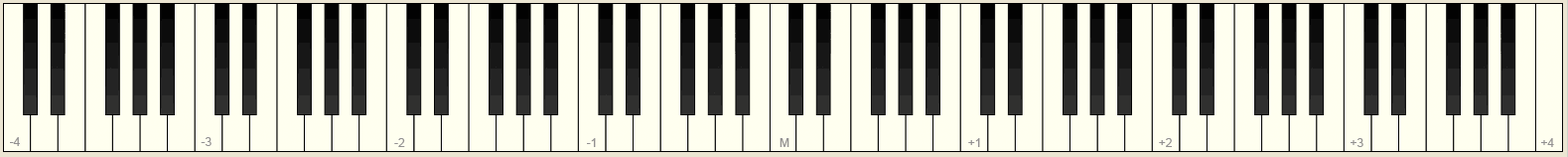
<style>
.page{position:relative;width:1568px;height:157px;background:#ffffef}
.page>*{position:absolute;margin:0}
.t1{font:11.9px "ArialMT";color:#939191}
</style>
<div class="page">
<p class="t1" style="left:10px;top:137px;width:10px;height:9px">-4</p>
<p class="t1" style="left:201px;top:137px;width:11px;height:9px">-3</p>
<p class="t1" style="left:394px;top:138px;width:11px;height:9px">-2</p>
<p class="t1" style="left:587px;top:138px;width:9px;height:9px">-1</p>
<p class="t1" style="left:780px;top:138px;width:9px;height:9px">M</p>
<p class="t1" style="left:968px;top:138px;width:12px;height:9px">+1</p>
<p class="t1" style="left:1159px;top:138px;width:13px;height:9px">+2</p>
<p class="t1" style="left:1351px;top:138px;width:12px;height:9px">+3</p>
<p class="t1" style="left:1541px;top:138px;width:13px;height:9px">+4</p>
</div>
